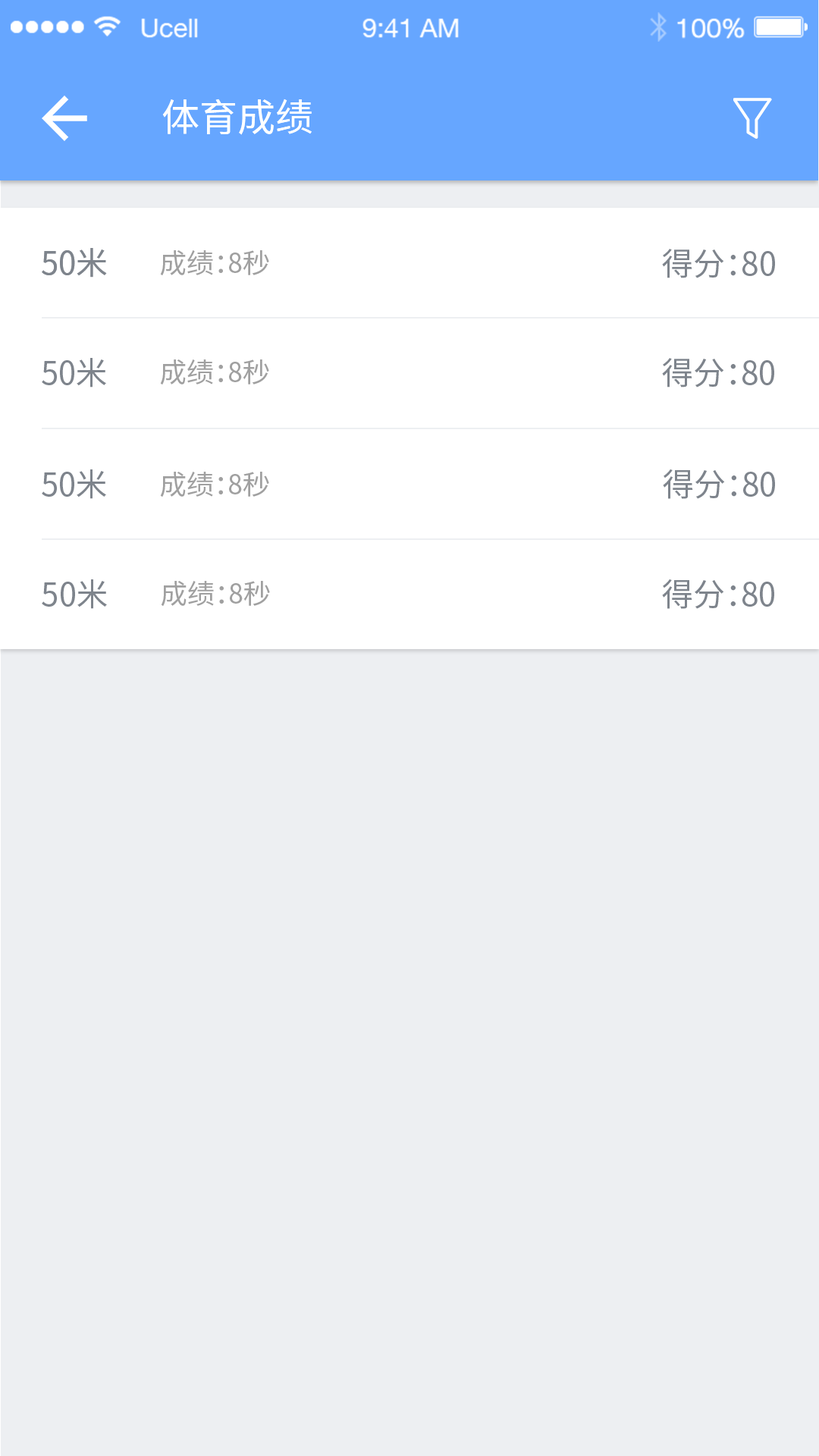
<style>
.page{position:relative;width:819px;height:1456px;background:#edeff2}
.page>*{position:absolute;margin:0}
.t1{font:37.9px "NotoSansHans-Regular";color:#ffffff}
.t2{font:31.8px "NotoSansHans-Regular";color:#7e848c}
.t3{font:27.3px "NotoSansHans-Regular";color:#a0a0a0}
.t4{font:31.9px "NotoSansHans-Regular";color:#7e848c}
</style>
<div class="page">
<p class="t1" style="left:162px;top:99px;width:150px;height:36px">体育成绩</p>
<p class="t2" style="left:42px;top:248px;width:65px;height:30px">50米</p>
<p class="t3" style="left:160px;top:250px;width:109px;height:26px">成绩：8秒</p>
<p class="t2" style="left:662px;top:249px;width:113px;height:29px">得分：80</p>
<p class="t2" style="left:42px;top:358px;width:64px;height:30px">50米</p>
<p class="t3" style="left:160px;top:359px;width:109px;height:26px">成绩：8秒</p>
<p class="t2" style="left:662px;top:358px;width:112px;height:30px">得分：80</p>
<p class="t4" style="left:42px;top:469px;width:64px;height:30px">50米</p>
<p class="t3" style="left:160px;top:472px;width:109px;height:25px">成绩：8秒</p>
<p class="t4" style="left:663px;top:469px;width:112px;height:30px">得分：80</p>
<p class="t4" style="left:42px;top:579px;width:65px;height:30px">50米</p>
<p class="t3" style="left:161px;top:581px;width:109px;height:26px">成绩：8秒</p>
<p class="t4" style="left:662px;top:579px;width:112px;height:30px">得分：80</p>
</div>
